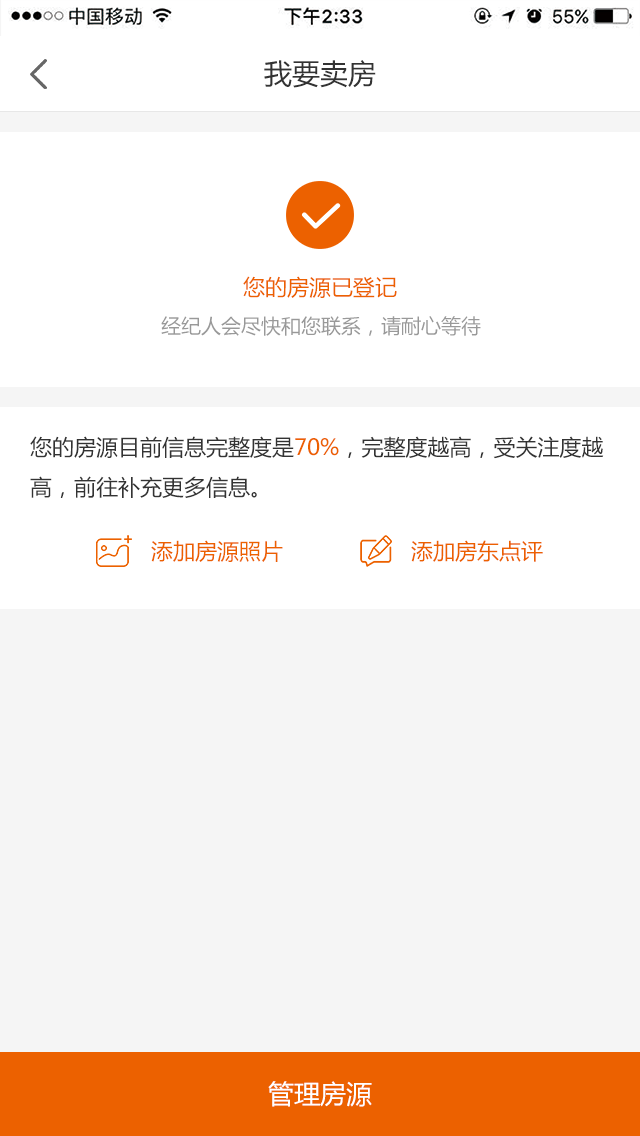
<style>
.page{position:relative;width:640px;height:1136px;background:#ffffff}
.page>*{position:absolute;margin:0}
.t1{font:28px "MicrosoftYaHei";color:#333333}
.t2{font:22px "MicrosoftYaHei";color:#ec6100}
.t3{font:20px "MicrosoftYaHei";color:#999999}
.t4{font:22px/40px "MicrosoftYaHei";color:#333333}
.t5{font:22px/40px "MicrosoftYaHei";color:#ec6100}
.t6{font:26px "MicrosoftYaHei";color:#ffffff}
</style>
<div class="page">
<p class="t1" style="left:264px;top:60px;width:112px;height:28px">我要卖房</p>
<p class="t2" style="left:243px;top:276px;width:154px;height:22px">您的房源已登记</p>
<p class="t3" style="left:161px;top:316px;width:320px;height:20px">经纪人会尽快和您联系，请耐心等待</p>
<p class="t4" style="left:30px;top:436px;width:574px;height:62px">您的房源目前信息完整度是<span class="t5">70%</span>，完整度越高，受关注度越<br>高，前往补充更多信息。</p>
<p class="t2" style="left:151px;top:540px;width:132px;height:22px">添加房源照片</p>
<p class="t2" style="left:411px;top:540px;width:132px;height:22px">添加房东点评</p>
<p class="t6" style="left:268px;top:1081px;width:104px;height:26px">管理房源</p>
</div>
